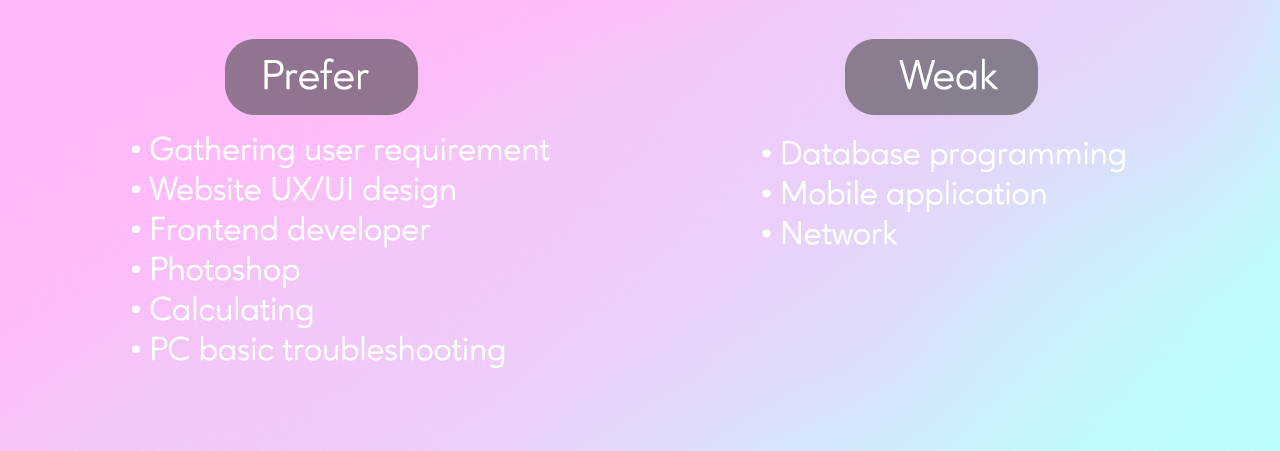
<style>
.page{position:relative;width:1280px;height:451px}
.page>*{position:absolute;margin:0}
.t1{font:41.7px "AgeoPersonalUse-Regular";color:#ffffff}
.t2{font:33.3px "AgeoPersonalUse-Regular";color:#ffffff}
.t3{font:33.3px "Itim-Regular";color:#ffffff}
</style>
<div class="page">
<p class="t1" style="left:264px;top:58px;width:734px;height:32px">Prefer                        Weak</p>
<p class="t2" style="left:132px;top:135px;width:418px;height:233px"><span class="t3">• </span>Gathering user requirement  <br><span class="t3">• </span>Website UX/UI design  <br><span class="t3">• </span>Frontend developer<br><span class="t3">• </span>Photoshop<br><span class="t3">• </span>Calculating<br><span class="t3">• </span>PC basic troubleshooting</p>
<p class="t2" style="left:762px;top:140px;width:363px;height:105px"><span class="t3">• </span>Database programming <br><span class="t3">• </span>Mobile application<br><span class="t3">• </span>Network</p>
</div>
